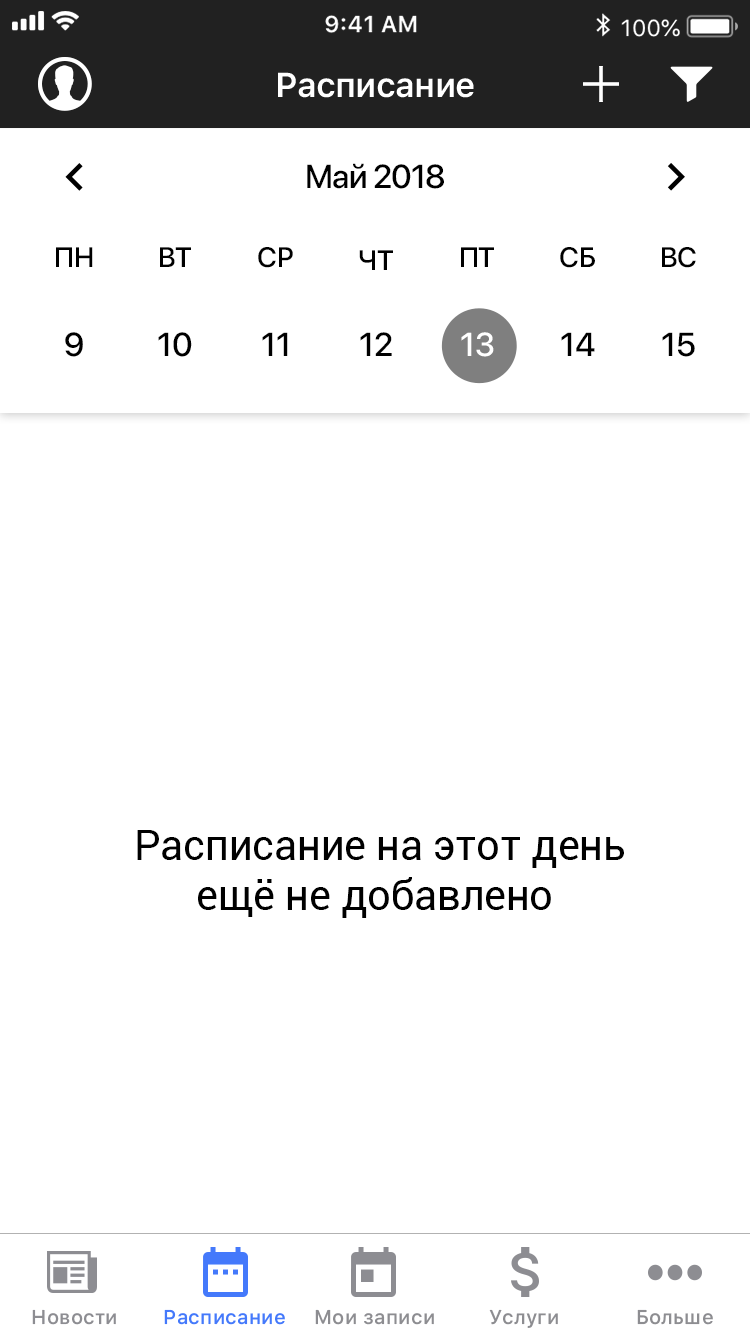
<style>
.page{position:relative;width:750px;height:1333px;background:#ffffff}
.page>*{position:absolute;margin:0}
.t1{font:34.3px "SFProText-Semibold";letter-spacing:-0.024em;color:#ffffff}
.t2{font:33px "SFProDisplay-Medium";letter-spacing:-0.023em;color:#000000}
.t3{font:28px "SFProDisplay-Medium";color:#000000}
.t4{font:33px "SFProDisplay-Medium";color:#000000}
.t5{font:33px "SFProDisplay-Medium";color:#ffffff}
.t6{font:41.7px "Roboto-Regular";color:#000000}
.t7{font:19.8px "SFProText-Medium";letter-spacing:0.012em;color:#8d8d92}
.t8{font:19.8px "SFProText-Medium";letter-spacing:0.012em;color:#4479fb}
.t9{font:19.8px "SFProText-Medium";letter-spacing:0.012em;color:#8d8d91}
</style>
<div class="page">
<p class="t1" style="left:278px;top:72px;width:196px;height:26px">Расписание</p>
<p class="t2" style="left:307px;top:163px;width:137px;height:26px">Май 2018</p>
<p class="t3" style="left:56px;top:247px;width:37px;height:20px">ПН</p>
<p class="t3" style="left:160px;top:247px;width:31px;height:20px">ВТ</p>
<p class="t3" style="left:258px;top:247px;width:35px;height:21px">СР</p>
<p class="t3" style="left:359px;top:250px;width:34px;height:20px">ЧТ</p>
<p class="t3" style="left:461px;top:247px;width:33px;height:20px">ПТ</p>
<p class="t3" style="left:560px;top:247px;width:35px;height:21px">СБ</p>
<p class="t3" style="left:662px;top:247px;width:34px;height:21px">ВС</p>
<p class="t4" style="left:65px;top:332px;width:18px;height:25px">9</p>
<p class="t4" style="left:158px;top:332px;width:34px;height:25px">10</p>
<p class="t4" style="left:262px;top:332px;width:26px;height:24px">11</p>
<p class="t4" style="left:360px;top:332px;width:32px;height:24px">12</p>
<p class="t5" style="left:461px;top:332px;width:33px;height:25px">13</p>
<p class="t4" style="left:561px;top:332px;width:34px;height:24px">14</p>
<p class="t4" style="left:662px;top:332px;width:33px;height:25px">15</p>
<p class="t6" style="left:137px;top:830px;width:487px;height:88px;text-align:center">Расписание на этот день<br>ещё не добавлено</p>
<p class="t7" style="left:32px;top:1309px;width:84px;height:16px">Новости</p>
<p class="t8" style="left:164px;top:1309px;width:121px;height:16px">Расписание</p>
<p class="t9" style="left:315px;top:1309px;width:119px;height:16px">Мои записи</p>
<p class="t9" style="left:489px;top:1309px;width:69px;height:19px">Услуги</p>
<p class="t9" style="left:637px;top:1309px;width:76px;height:16px">Больше</p>
</div>
